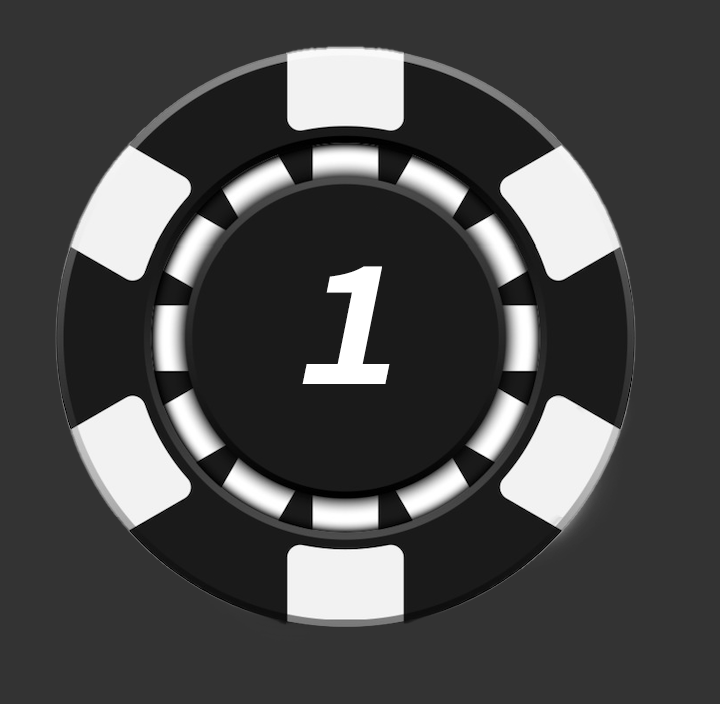
<style>
.page{position:relative;width:720px;height:704px;background:#333333}
.page>*{position:absolute;margin:0}
.t1{font:180px "SourceCodePro-BoldIt";color:#ffffff;text-transform:uppercase}
</style>
<div class="page">
<p class="t1" style="left:302px;top:266px;width:88px;height:118px">1</p>
</div>
